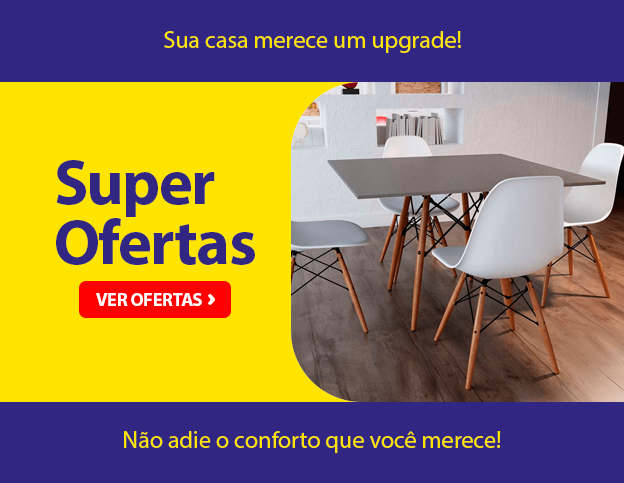
<style>
.page{position:relative;width:624px;height:483px;background:#312783}
.page>*{position:absolute;margin:0}
.t1{font:24px "MyriadPro-Regular";color:#ffe400}
.t2{font:64.1px/60.7px "MyriadPro-Bold";letter-spacing:-0.025em;color:#312783}
.t3{font:18.5px "MyriadPro-Bold";letter-spacing:-0.025em;color:#ffffff}
</style>
<div class="page">
<p class="t1" style="left:164px;top:31px;width:297px;height:22px">Sua casa merece um upgrade!</p>
<p class="t2" style="left:56px;top:160px;width:199px;height:105px">Super<br>Ofertas</p>
<p class="t3" style="left:96px;top:293px;width:106px;height:13px">VER OFERTAS</p>
<p class="t1" style="left:124px;top:431px;width:377px;height:22px">Não adie o conforto que você merece!</p>
</div>
